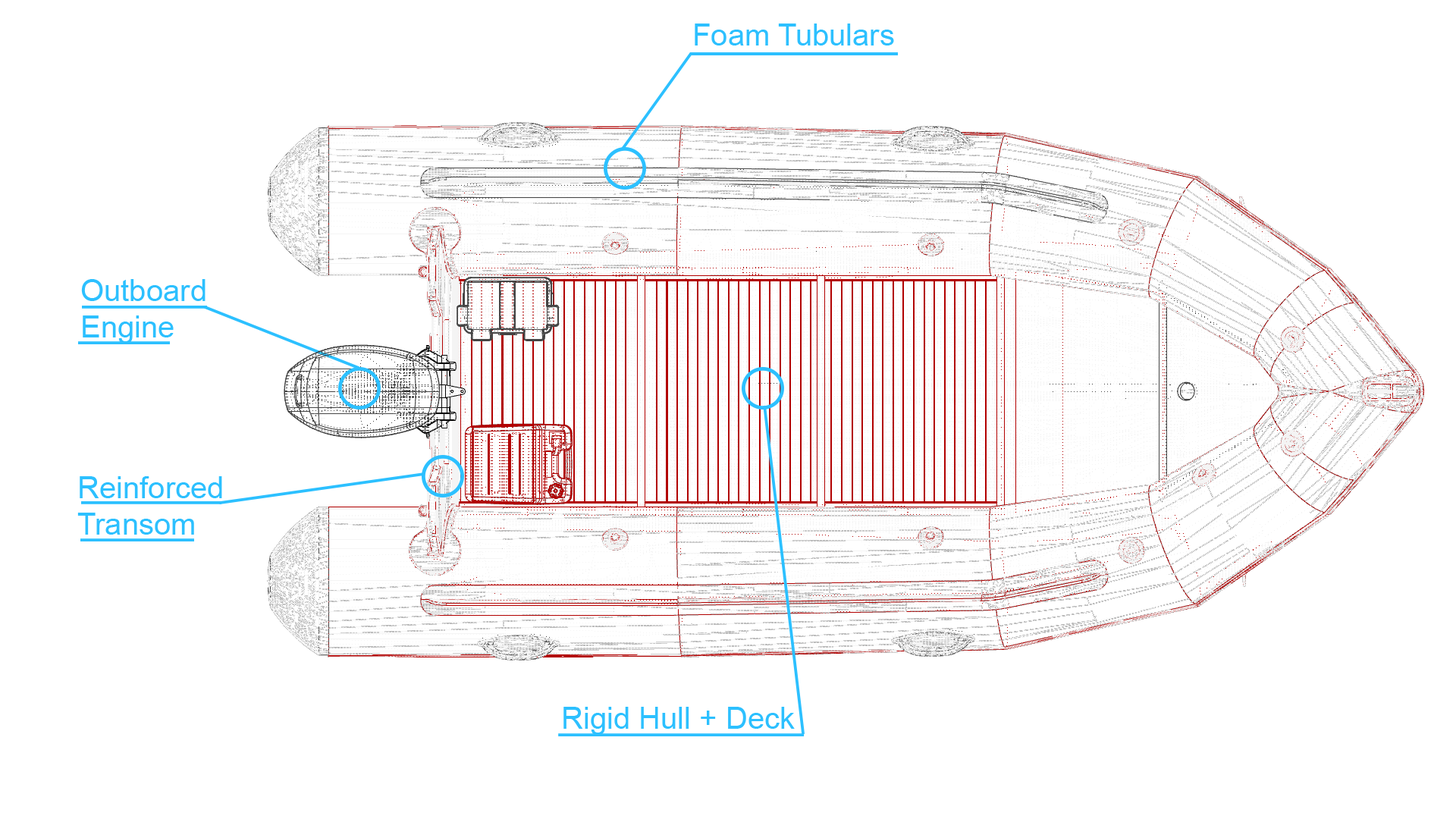
<style>
.page{position:relative;width:1456px;height:819px;background:#ffffff}
.page>*{position:absolute;margin:0}
.t1{font:30.3px "ArialMT";color:#2cc0ff}
</style>
<div class="page">
<p class="t1" style="left:695px;top:24px;width:199px;height:21px">Foam Tubulars</p>
<p class="t1" style="left:81px;top:279px;width:125px;height:65px">Outboard Engine</p>
<p class="t1" style="left:77px;top:476px;width:145px;height:59px">Reinforced<br>Transom</p>
<p class="t1" style="left:563px;top:707px;width:232px;height:28px">Rigid Hull + Deck</p>
</div>
